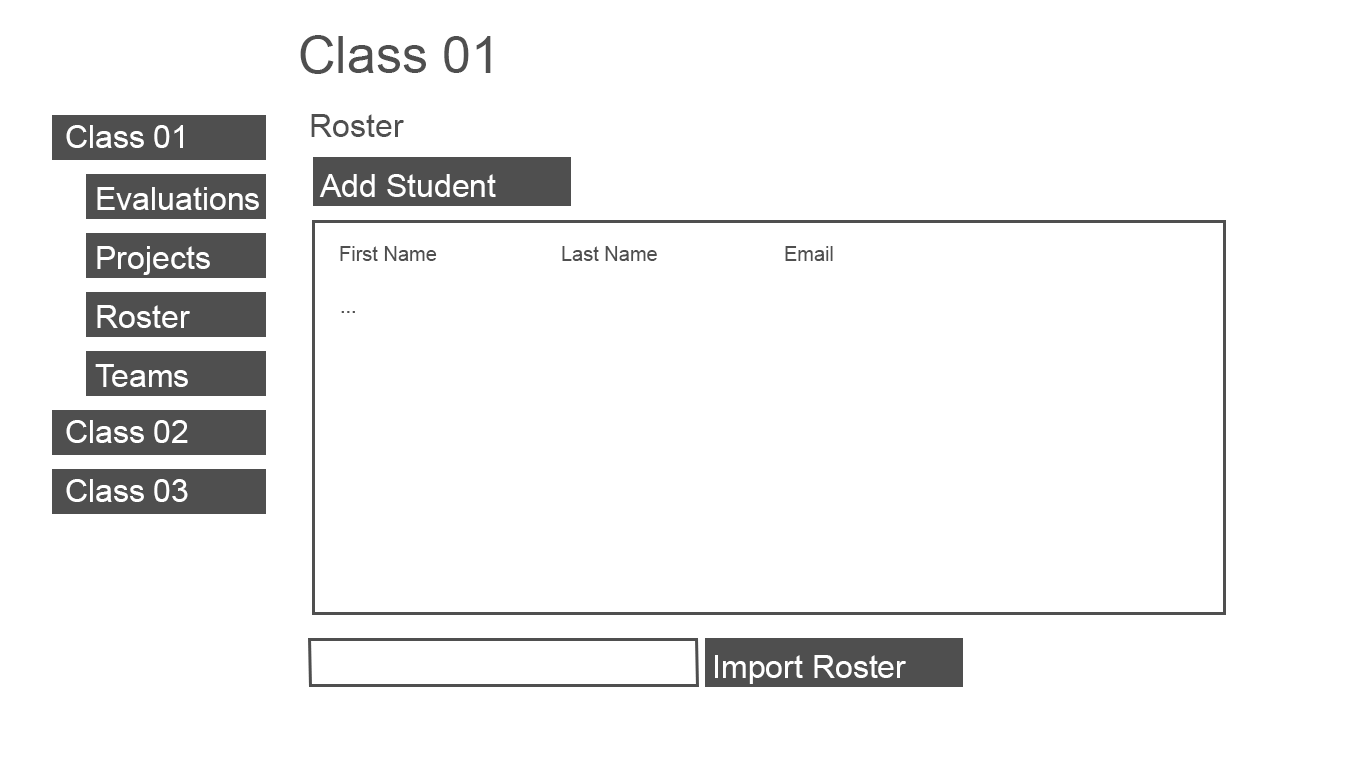
<style>
.page{position:relative;width:1366px;height:768px;background:#ffffff}
.page>*{position:absolute;margin:0}
.t1{font:52px "ArialMT";color:#4f4f4f}
.t2{font:32px "ArialMT";color:#ffffff}
.t3{font:32px "ArialMT";color:#4f4f4f}
.t4{font:20px "ArialMT";color:#4f4f4f}
</style>
<div class="page">
<p class="t1" style="left:300px;top:35px;width:191px;height:39px">Class 01</p>
<p class="t2" style="left:66px;top:125px;width:117px;height:23px">Class 01</p>
<p class="t3" style="left:311px;top:114px;width:93px;height:23px">Roster</p>
<p class="t2" style="left:319px;top:174px;width:177px;height:23px">Add Student</p>
<p class="t2" style="left:97px;top:187px;width:162px;height:23px">Evaluations</p>
<p class="t2" style="left:97px;top:246px;width:113px;height:29px">Projects</p>
<p class="t4" style="left:340px;top:246px;width:97px;height:15px">First Name</p>
<p class="t4" style="left:562px;top:246px;width:95px;height:15px">Last Name</p>
<p class="t4" style="left:785px;top:246px;width:48px;height:15px">Email</p>
<p class="t2" style="left:97px;top:305px;width:93px;height:23px">Roster</p>
<p class="t4" style="left:341px;top:311px;width:14px;height:2px">...</p>
<p class="t2" style="left:95px;top:364px;width:93px;height:23px">Teams</p>
<p class="t2" style="left:66px;top:420px;width:122px;height:23px">Class 02</p>
<p class="t2" style="left:66px;top:479px;width:122px;height:23px">Class 03</p>
<p class="t2" style="left:715px;top:655px;width:191px;height:29px">Import Roster</p>
</div>
